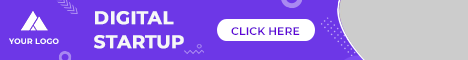
<style>
.page{position:relative;width:468px;height:60px;background:#6d37e7}
.page>*{position:absolute;margin:0}
.t1{font:18.3px/24px "Montserrat-Bold";color:#f7f7f7;font-weight:bold}
.t2{font:11px "Montserrat-SemiBold";color:#5f04d6}
.t3{font:7.7px "Montserrat-Bold";letter-spacing:0.025em;color:#ffffff}
</style>
<div class="page">
<p class="t1" style="left:94px;top:11px;width:90px;height:38px">DIGITAL<br>STARTUP</p>
<p class="t2" style="left:231px;top:27px;width:69px;height:8px">CLICK HERE</p>
<p class="t3" style="left:9px;top:38px;width:50px;height:6px">YOUR LOGO</p>
</div>
